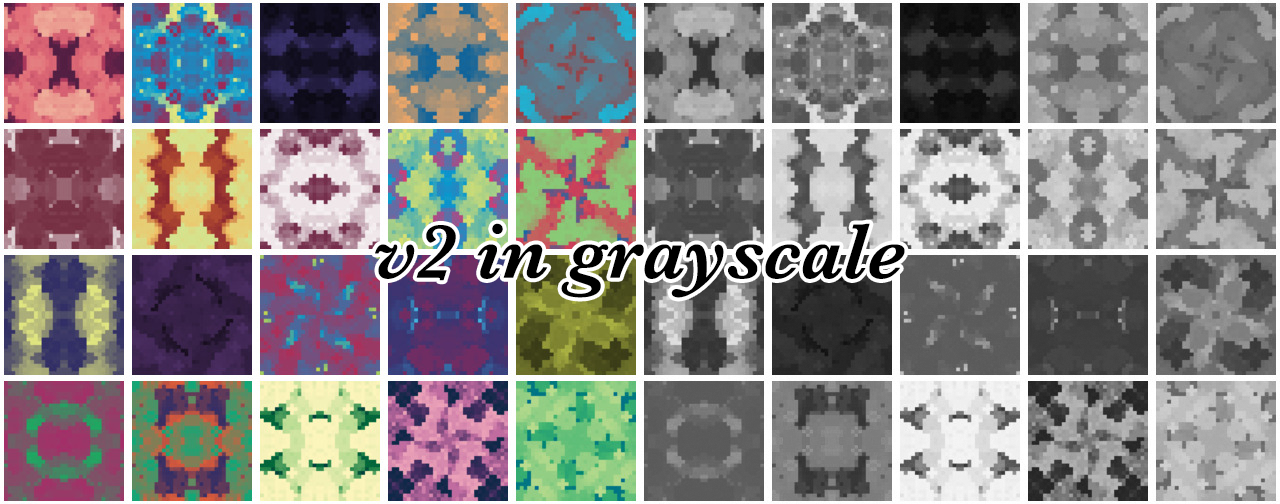
<style>
.page{position:relative;width:1280px;height:504px}
.page>*{position:absolute;margin:0}
.t1{font:80px "Baskerville-SemiBoldItalic";color:#000000}
</style>
<div class="page">
<p class="t1" style="left:375px;top:223px;width:530px;height:75px">v2 in grayscale</p>
</div>
